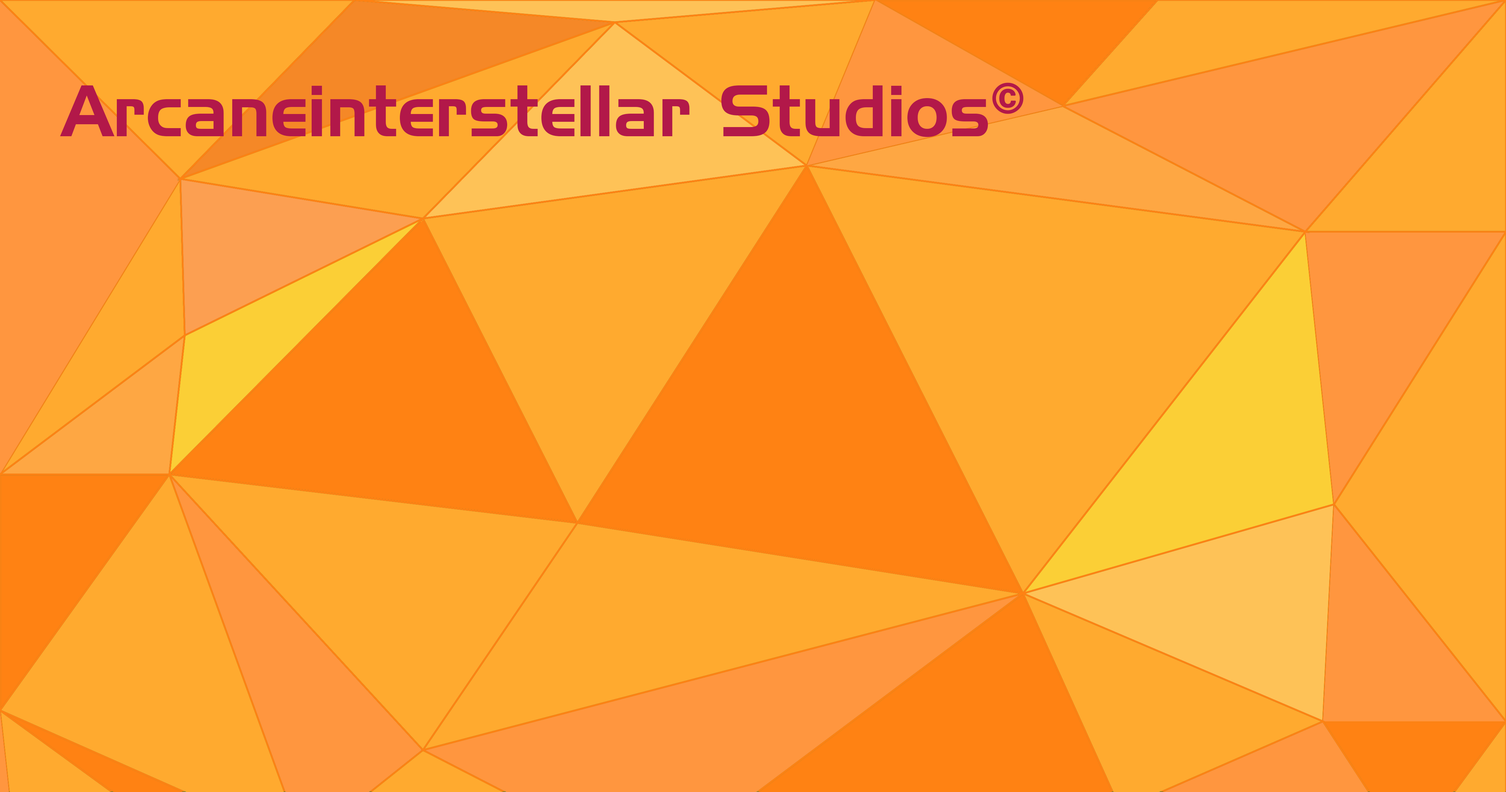
<style>
.page{position:relative;width:1506px;height:792px;background:#ffaa2f}
.page>*{position:absolute;margin:0}
.t1{font:70.6px "435-CAI978";color:#b21849}
.t2{font:70.6px "435-CAI978";color:#b21849;font-weight:bold}
</style>
<div class="page">
<p class="t1" style="left:60px;top:83px;width:963px;height:54px">Arcaneinterstellar Studios<span class="t2">©</span></p>
</div>
